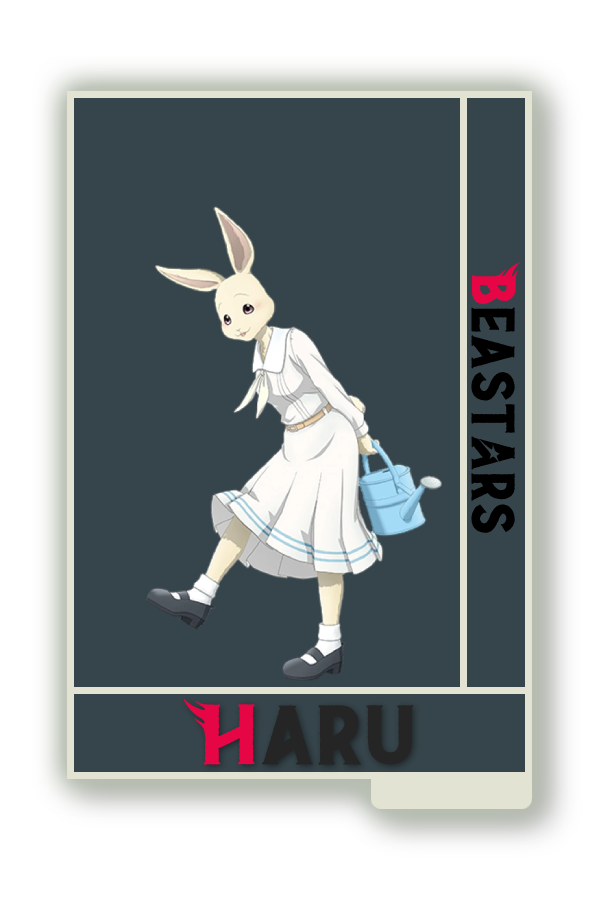
<style>
.page{position:relative;width:600px;height:900px;background:#36454b}
.page>*{position:absolute;margin:0}
.t1{font:48.8px "BEAST";color:#000000}
.t2{font:48.8px "BEAST";color:#e60646}
.t3{font:67px "BEAST";color:#252525;scale:1.12 1}
.t4{font:67px "BEAST";color:#e60646;scale:1.12 1}
</style>
<div class="page">
<p class="t1" style="left:471px;top:262px;width:50px;height:271px;rotate:90deg"><span class="t2">B</span>east@rs</p>
<p class="t3" style="left:183px;top:698px;width:231px;height:67px"><span class="t4">H</span>aru</p>
</div>
